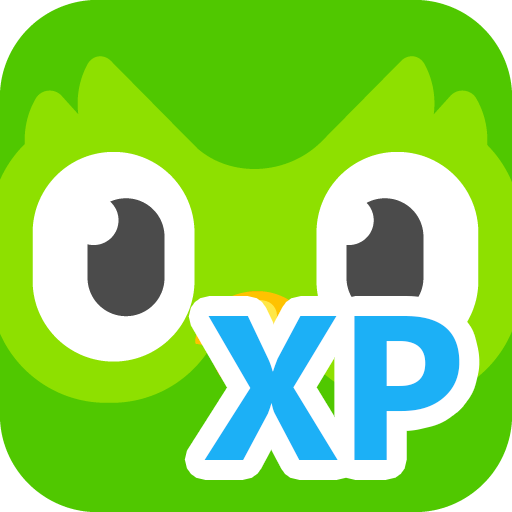
<style>
.page{position:relative;width:512px;height:512px;background:#50c800}
.page>*{position:absolute;margin:0}
.t1{font:204.8px "SegoeUI-Bold";color:#1cb0f6}
</style>
<div class="page">
<p class="t1" style="left:204px;top:316px;width:256px;height:144px">XP</p>
</div>
